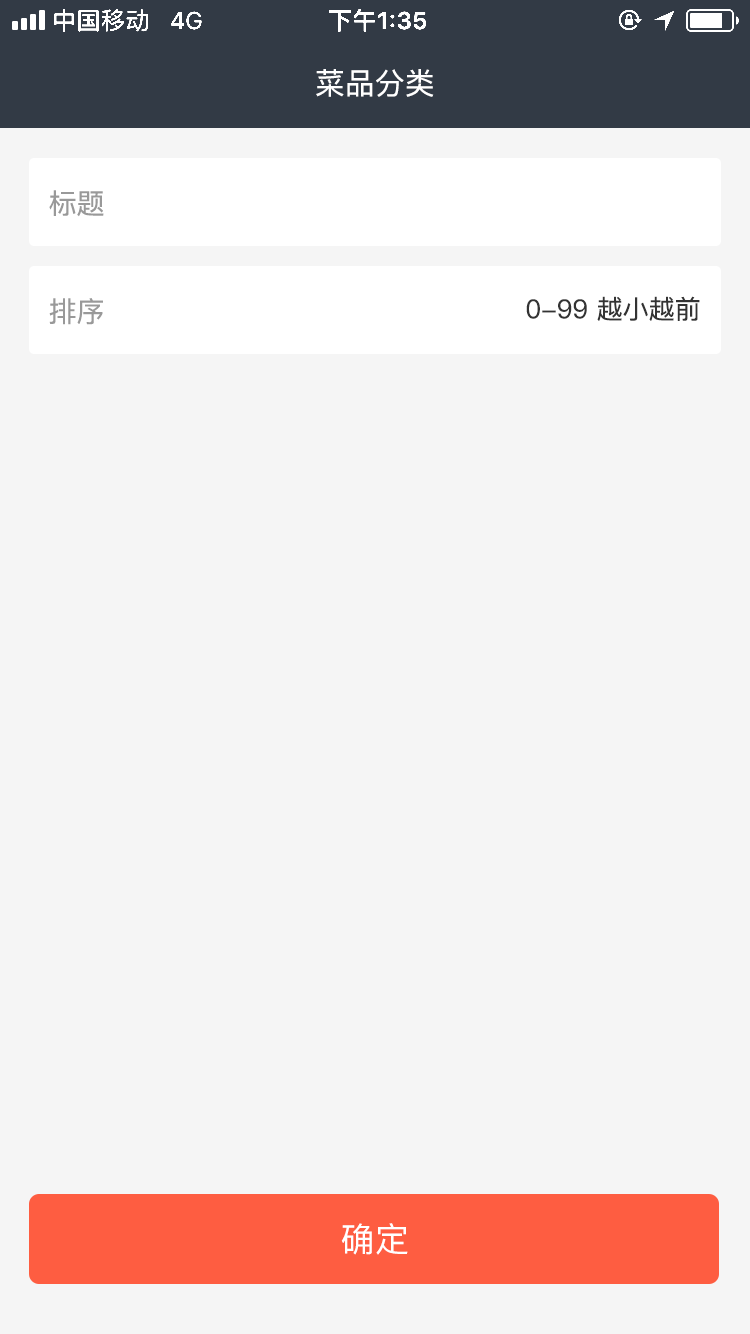
<style>
.page{position:relative;width:750px;height:1334px;background:#f5f5f5}
.page>*{position:absolute;margin:0}
.t1{font:30px "PingFang-SC-Medium";color:#ffffff}
.t2{font:28px "PingFang-SC-Medium";color:#999999}
.t3{font:26px "PingFang-SC-Medium";color:#333333}
.t4{font:34px "PingFang-SC-Medium";letter-spacing:0.02em;color:#ffffff}
</style>
<div class="page">
<p class="t1" style="left:316px;top:69px;width:118px;height:28px">菜品分类</p>
<p class="t2" style="left:49px;top:190px;width:55px;height:27px">标题</p>
<p class="t2" style="left:49px;top:298px;width:54px;height:27px">排序</p>
<p class="t3" style="left:526px;top:296px;width:174px;height:25px">0-99 越小越前</p>
<p class="t4" style="left:341px;top:1223px;width:67px;height:32px">确定</p>
</div>
